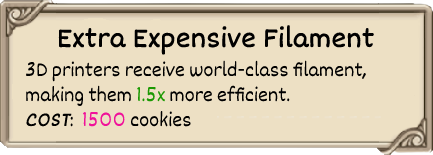
<style>
.page{position:relative;width:433px;height:155px;background:#ede0c4}
.page>*{position:absolute;margin:0}
.t1{font:30px "Dekko";color:#000000;font-weight:bold}
.t2{font:21px "Dekko";color:#000000}
.t3{font:21px "Dekko";color:#1b9902}
.t4{font:21px "Dekko";color:#000000;font-weight:bold;font-style:italic}
.t5{font:21px "Dekko";color:#f0129a}
</style>
<div class="page">
<p class="t1" style="left:58px;top:25px;width:316px;height:30px">Extra Expensive Filament</p>
<p class="t2" style="left:26px;top:60px;width:340px;height:67px">3D printers receive world-class filament, <br>making them <span class="t3">1.5x </span>more efficient.<br><span class="t4">COST</span>:  <span class="t5">1500 </span>cookies</p>
</div>
